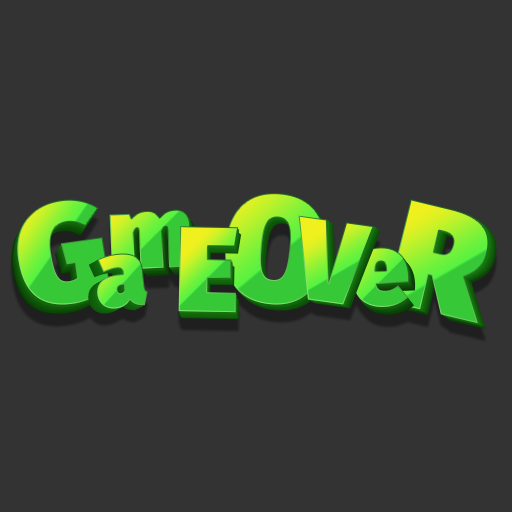
<style>
.page{position:relative;width:512px;height:512px;background:#333333}
.page>*{position:absolute;margin:0}
.t1{font:150px "FiraSans-Ultra"}
.t2{font:140.3px "FiraSans-Ultra"}
.t3{font:102.9px "FiraSans-Ultra"}
.t4{font:149.7px "FiraSans-Ultra"}
.t5{font:116.9px "FiraSans-Ultra"}
.t6{font:121.6px "FiraSans-Ultra"}
.t7{font:93.5px "FiraSans-Ultra"}
</style>
<div class="page">
<p class="t1" style="left:225px;top:193px;width:101px;height:112px;rotate:5deg">O</p>
<p class="t2" style="left:17px;top:199px;width:93px;height:106px;rotate:-9deg">G</p>
<p class="t3" style="left:109px;top:209px;width:83px;height:61px;rotate:-3deg">m</p>
<p class="t4" style="left:386px;top:199px;width:103px;height:125px;rotate:14deg">R</p>
<p class="t5" style="left:298px;top:215px;width:76px;height:90px;rotate:8deg">V</p>
<p class="t6" style="left:178px;top:226px;width:61px;height:87px;rotate:1deg">E</p>
<p class="t7" style="left:97px;top:253px;width:51px;height:56px;rotate:-5deg">a</p>
<p class="t3" style="left:352px;top:247px;width:58px;height:60px;rotate:-3deg">e</p>
</div>
